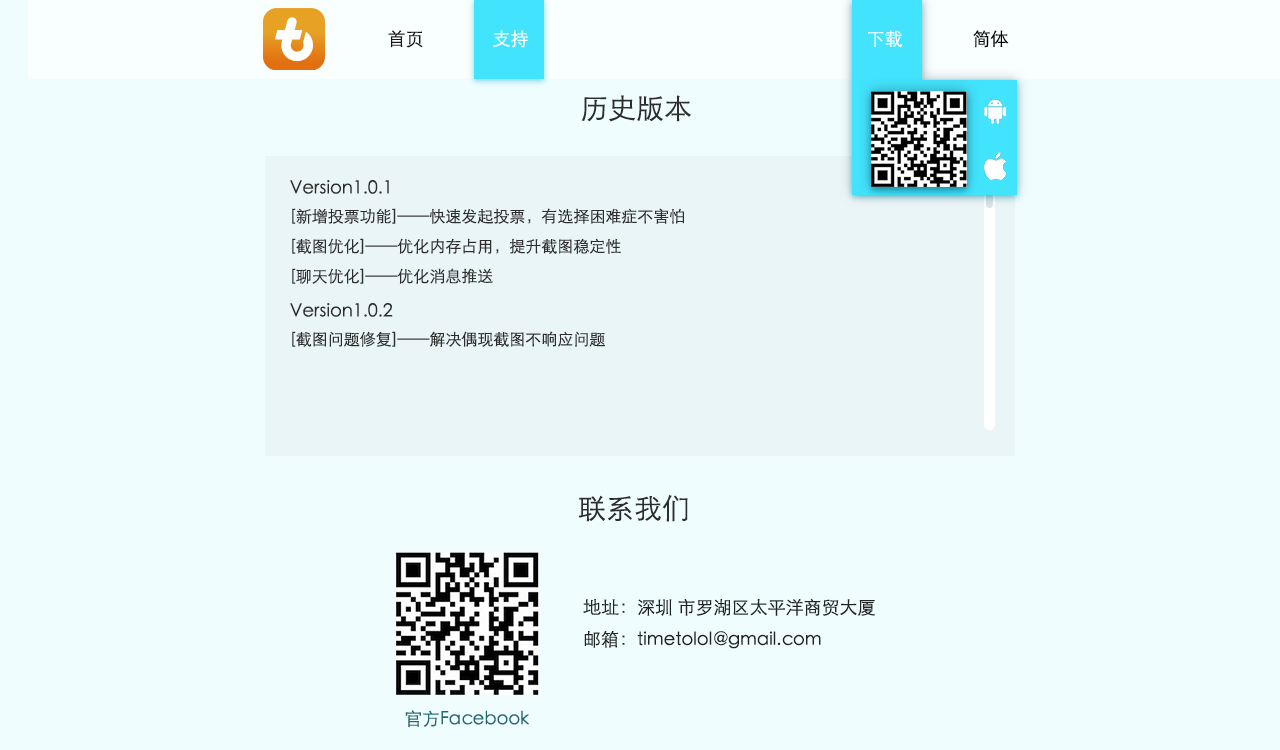
<style>
.page{position:relative;width:1280px;height:750px;background:#effdff}
.page>*{position:absolute;margin:0}
.t1{font:18px "STXihei";color:#171717}
.t2{font:18px "STXihei";color:#ffffff}
.t3{font:18px "STXihei";color:#000000}
.t4{font:28px "STXihei";color:#2d2d2d}
.t5{font:18px "STXihei";color:#2d2d2d}
.t6{font:16px "STXihei";color:#2d2d2d}
.t7{font:18px "STXihei";color:#232323}
.t8{font:18px "STXihei";color:#226873}
</style>
<div class="page">
<p class="t1" style="left:388px;top:30px;width:35px;height:18px">首页</p>
<p class="t2" style="left:493px;top:30px;width:35px;height:18px">支持</p>
<p class="t2" style="left:868px;top:30px;width:34px;height:18px">下载</p>
<p class="t3" style="left:973px;top:30px;width:36px;height:18px">简体</p>
<p class="t4" style="left:581px;top:95px;width:110px;height:27px">历史版本</p>
<p class="t5" style="left:290px;top:180px;width:99px;height:14px">Version1.0.1</p>
<p class="t6" style="left:292px;top:208px;width:392px;height:16px">[新增投票功能]——快速发起投票，有选择困难症不害怕</p>
<p class="t6" style="left:292px;top:238px;width:329px;height:16px">[截图优化]——优化内存占用，提升截图稳定性</p>
<p class="t6" style="left:292px;top:268px;width:201px;height:16px">[聊天优化]——优化消息推送</p>
<p class="t5" style="left:290px;top:303px;width:103px;height:14px">Version1.0.2</p>
<p class="t6" style="left:292px;top:331px;width:313px;height:16px">[截图问题修复]——解决偶现截图不响应问题</p>
<p class="t4" style="left:578px;top:495px;width:110px;height:27px">联系我们</p>
<p class="t7" style="left:583px;top:598px;width:292px;height:18px">地址：深圳 市罗湖区太平洋商贸大厦</p>
<p class="t7" style="left:584px;top:631px;width:237px;height:18px">邮箱：timetolol@gmail.com</p>
<p class="t8" style="left:405px;top:710px;width:125px;height:17px">官方Facebook</p>
</div>
